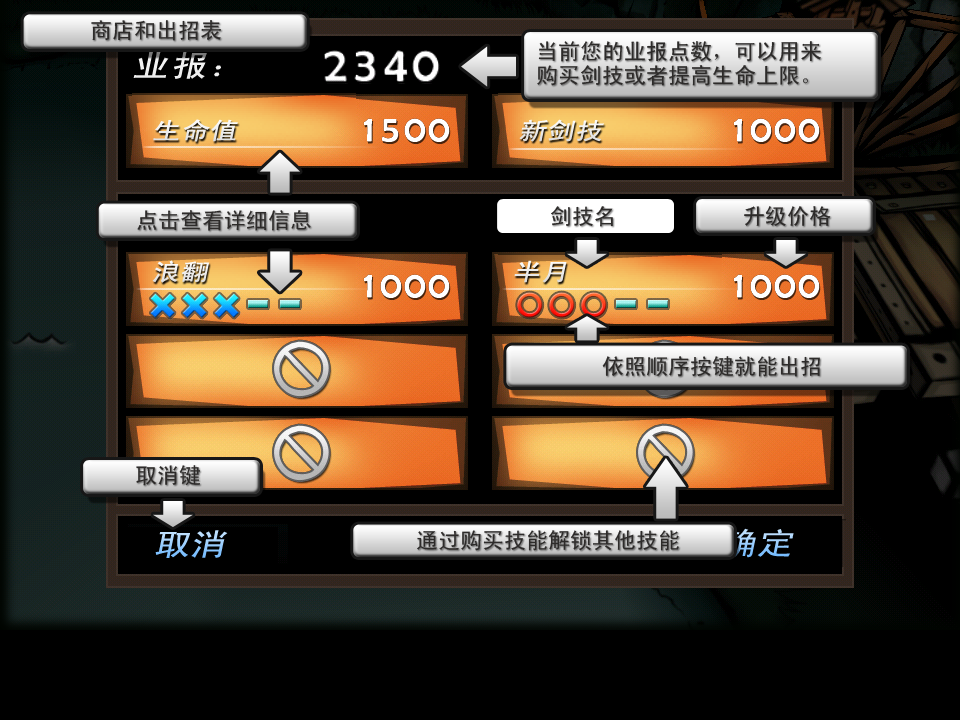
<style>
.page{position:relative;width:960px;height:720px;background:#000000}
.page>*{position:absolute;margin:0}
.t1{font:22px "SimHei";color:#2d2b2a}
.t2{font:22px/24px "SimHei";color:#2d2b2a}
.t3{font:30.6px "SimHei";letter-spacing:0.075em;color:#f2f2f2;font-style:italic;scale:1.18 1}
.t4{font:23.8px "SimHei";letter-spacing:0.01em;color:#ffffff;font-style:italic;scale:1.18 1}
.t5{font:30.6px "SimHei";letter-spacing:0.01em;font-style:italic;scale:1.18 1}
.t6{font:30.6px "SimHei";font-style:italic;scale:1.18 1}
</style>
<div class="page">
<p class="t1" style="left:91px;top:20px;width:130px;height:21px">商店和出招表</p>
<p class="t2" style="left:537px;top:41px;width:284px;height:45px">当前您的业报点数，可以用来<br>购买剑技或者提高生命上限。</p>
<p class="t3" style="left:133px;top:51px;width:88px;height:28px">业报：</p>
<p class="t4" style="left:153px;top:119px;width:85px;height:23px">生命值</p>
<p class="t4" style="left:519px;top:119px;width:85px;height:23px">新剑技</p>
<p class="t1" style="left:551px;top:206px;width:62px;height:21px">剑技名</p>
<p class="t1" style="left:744px;top:206px;width:87px;height:20px">升级价格</p>
<p class="t1" style="left:137px;top:210px;width:174px;height:21px">点击查看详细信息</p>
<p class="t4" style="left:152px;top:260px;width:58px;height:23px">浪翻</p>
<p class="t4" style="left:514px;top:260px;width:53px;height:23px">半月</p>
<p class="t1" style="left:602px;top:356px;width:218px;height:21px">依照顺序按键就能出招</p>
<p class="t1" style="left:136px;top:465px;width:64px;height:21px">取消键</p>
<p class="t5" style="left:155px;top:530px;width:73px;height:28px">取消</p>
<p class="t1" style="left:417px;top:530px;width:262px;height:21px">通过购买技能解锁其他技能</p>
<p class="t6" style="left:723px;top:528px;width:71px;height:30px">确定</p>
</div>
